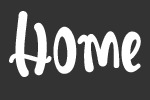
<style>
.page{position:relative;width:150px;height:100px;background:#333333}
.page>*{position:absolute;margin:0}
.t1{font:54.5px "SweetUnicorn";color:#ffffff}
</style>
<div class="page">
<p class="t1" style="left:9px;top:11px;width:132px;height:66px">Home</p>
</div>
